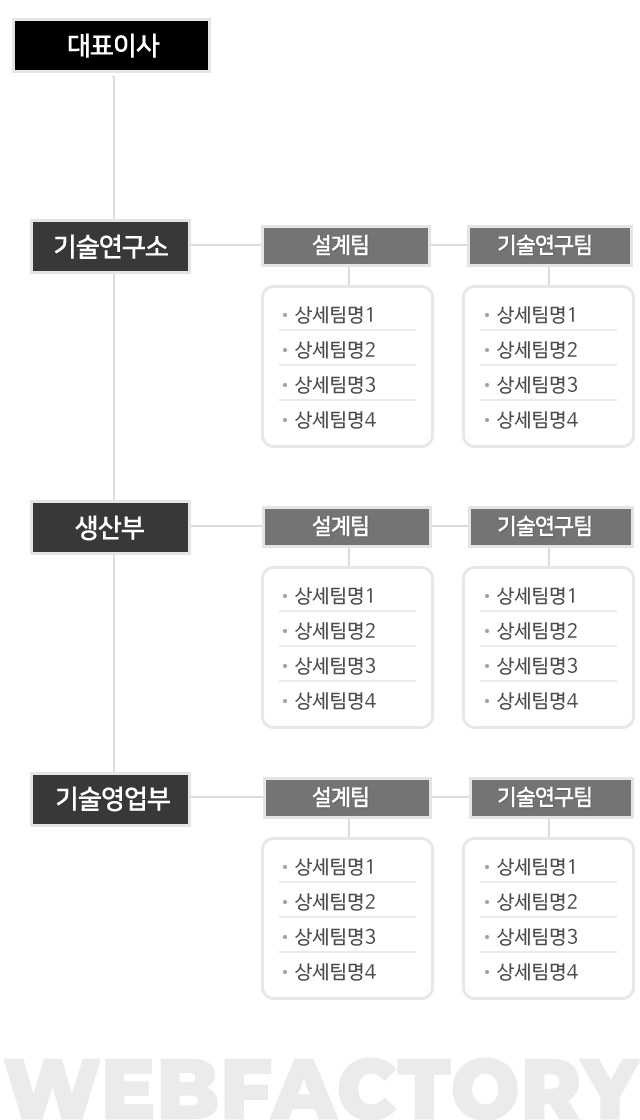
<style>
.page{position:relative;width:640px;height:1120px;background:#ffffff}
.page>*{position:absolute;margin:0}
.t1{font:26px "NanumSquareB";letter-spacing:-0.025em;color:#ffffff}
.t2{font:22px "NanumSquareB";letter-spacing:-0.025em;color:#ffffff}
.t3{font:19px/35px "NanumBarunGothic";letter-spacing:0.025em;color:#4d4d4d}
.t4{font:86.7px "Montserrat-Black";color:#ebebeb;text-transform:uppercase;scale:0.95 1}
</style>
<div class="page">
<p class="t1" style="left:68px;top:33px;width:92px;height:25px">대표이사</p>
<p class="t1" style="left:54px;top:234px;width:114px;height:25px">기술연구소</p>
<p class="t2" style="left:312px;top:234px;width:56px;height:22px">설계팀</p>
<p class="t2" style="left:498px;top:234px;width:93px;height:22px">기술연구팀</p>
<p class="t3" style="left:295px;top:306px;width:81px;height:123px">상세팀명1<br>상세팀명2<br>상세팀명3<br>상세팀명4</p>
<p class="t3" style="left:497px;top:306px;width:81px;height:123px">상세팀명1<br>상세팀명2<br>상세팀명3<br>상세팀명4</p>
<p class="t1" style="left:75px;top:515px;width:69px;height:26px">생산부</p>
<p class="t2" style="left:312px;top:515px;width:56px;height:22px">설계팀</p>
<p class="t2" style="left:498px;top:515px;width:93px;height:22px">기술연구팀</p>
<p class="t3" style="left:295px;top:587px;width:81px;height:123px">상세팀명1<br>상세팀명2<br>상세팀명3<br>상세팀명4</p>
<p class="t3" style="left:497px;top:587px;width:81px;height:123px">상세팀명1<br>상세팀명2<br>상세팀명3<br>상세팀명4</p>
<p class="t1" style="left:56px;top:786px;width:114px;height:26px">기술영업부</p>
<p class="t2" style="left:312px;top:786px;width:56px;height:22px">설계팀</p>
<p class="t2" style="left:498px;top:786px;width:93px;height:22px">기술연구팀</p>
<p class="t3" style="left:295px;top:858px;width:81px;height:123px">상세팀명1<br>상세팀명2<br>상세팀명3<br>상세팀명4</p>
<p class="t3" style="left:497px;top:858px;width:81px;height:123px">상세팀명1<br>상세팀명2<br>상세팀명3<br>상세팀명4</p>
<p class="t4" style="left:3px;top:1057px;width:639px;height:64px">webfactory</p>
</div>
